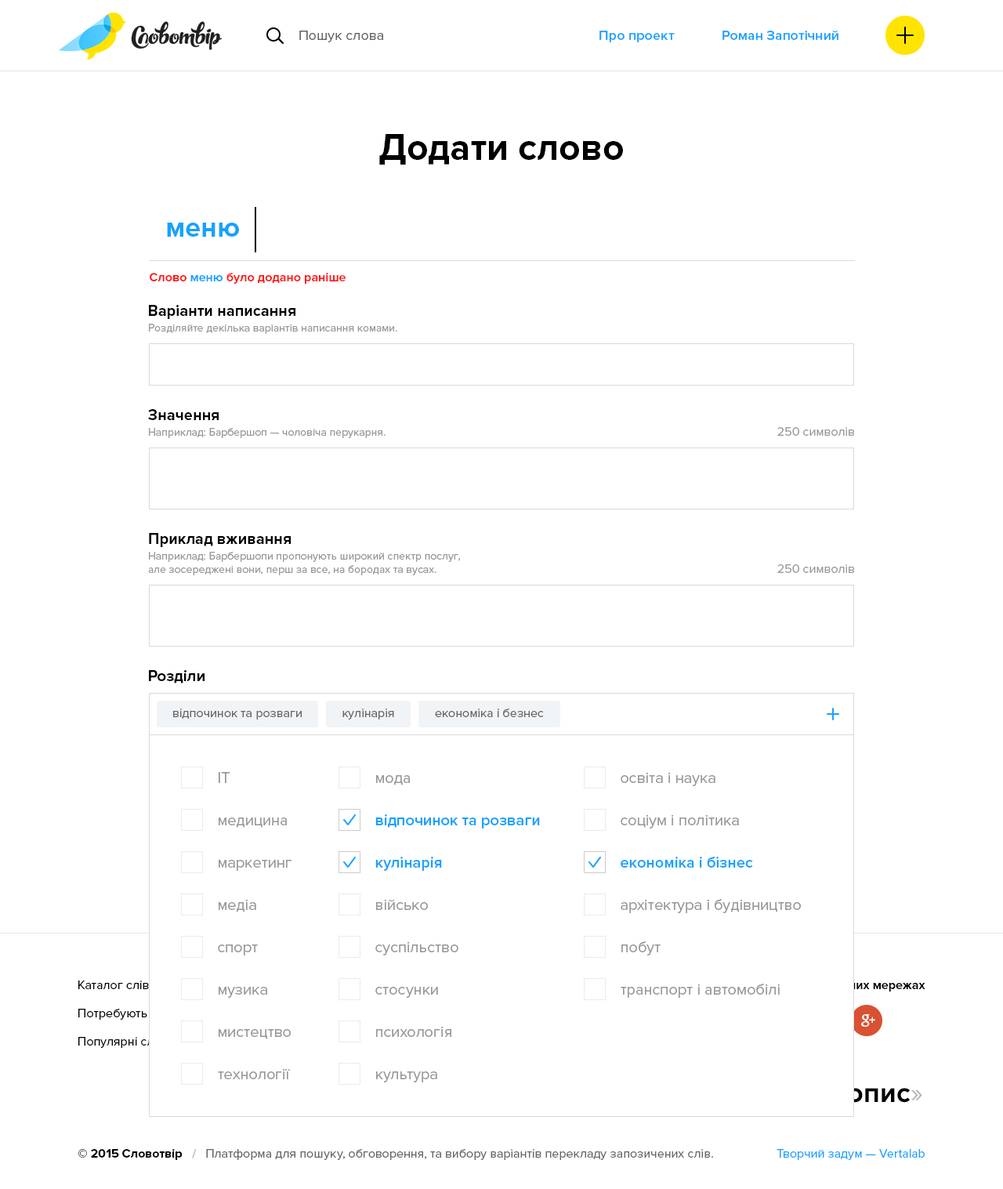
<style>
.page{position:relative;width:1003px;height:1189px;background:#ffffff}
.page>*{position:absolute;margin:0}
.t1{font:14.1px "ProximaNova-Regular";color:#666666}
.t2{font:14.1px "ProximaNova-Semibold";color:#17a2ff}
.t3{font:37.6px "ProximaNova-Bold";color:#000000}
.t4{font:28.2px "ProximaNova-Bold";color:#17a2ff}
.t5{font:12.5px "ProximaNova-Bold";color:#ff1717}
.t6{font:12.5px "ProximaNova-Bold";color:#17a2ff}
.t7{font:15.7px "ProximaNova-Bold";color:#000000}
.t8{font:11px "ProximaNova-Regular";color:#999999}
.t9{font:12.5px "ProximaNova-Regular";color:#999999}
.t10{font:12.5px "ProximaNova-Regular";color:#666666}
.t11{font:15.7px/42.3px "ProximaNova-Regular";color:#999999}
.t12{font:15.7px/42.3px "ProximaNova-Semibold";color:#17a2ff}
.t13{font:12.5px/28.2px "ProximaNova-Regular";color:#000000}
.t14{font:12.5px "ProximaNova-Bold"}
.t15{font:28.2px "ProximaNova-Bold"}
.t16{font:28.2px "ProximaNova-Regular"}
.t17{font:12.5px "ProximaNova-Bold";color:#000000}
.t18{font:12.5px "ProximaNova-Bold";color:#bfbfbf}
.t19{font:12.5px "ProximaNova-Regular";color:#17a2ff}
</style>
<div class="page">
<p class="t1" style="left:299px;top:31px;width:84px;height:11px">Пошук слова</p>
<p class="t2" style="left:599px;top:31px;width:76px;height:11px">Про проект</p>
<p class="t2" style="left:723px;top:31px;width:115px;height:9px">Роман Запотічний</p>
<p class="t3" style="left:379px;top:134px;width:244px;height:31px">Додати слово</p>
<p class="t4" style="left:167px;top:223px;width:72px;height:14px">меню</p>
<p class="t5" style="left:150px;top:273px;width:196px;height:11px">Слово <span class="t6">меню</span> було додано раніше</p>
<p class="t7" style="left:149px;top:305px;width:146px;height:14px">Варіанти написання</p>
<p class="t8" style="left:149px;top:324px;width:248px;height:10px">Розділяйте декілька варіантів написання комами.</p>
<p class="t7" style="left:148px;top:409px;width:71px;height:11px">Значення</p>
<p class="t8" style="left:149px;top:428px;width:237px;height:10px">Наприклад: Барбершоп — чоловіча перукарня.</p>
<p class="t9" style="left:777px;top:427px;width:77px;height:9px">250 символів</p>
<p class="t7" style="left:149px;top:533px;width:142px;height:14px">Приклад вживання</p>
<p class="t8" style="left:148px;top:552px;width:312px;height:23px">Наприклад: Барбершопи пропонують широкий спектр послуг,<br>але зосереджені вони, перш за все, на бородах та вусах.</p>
<p class="t9" style="left:777px;top:564px;width:77px;height:9px">250 символів</p>
<p class="t7" style="left:149px;top:670px;width:56px;height:13px">Розділи</p>
<p class="t10" style="left:173px;top:708px;width:129px;height:11px">відпочинок та розваги</p>
<p class="t10" style="left:342px;top:708px;width:52px;height:11px">кулінарія</p>
<p class="t10" style="left:435px;top:708px;width:109px;height:9px">економіка і безнес</p>
<p class="t11" style="left:218px;top:772px;width:74px;height:307px">IT<br>медицина<br>маркетинг<br>медіа<br>спорт<br>музика<br>мистецтво<br>технології</p>
<p class="t11" style="left:621px;top:772px;width:180px;height:226px">освіта і наука<br>соціум і політика<br><span class="t12">економіка і бізнес<br></span>архітектура і будівництво<br>побут<br>транспорт і автомобілі</p>
<p class="t11" style="left:375px;top:775px;width:165px;height:307px">мода<br><span class="t12">відпочинок та розваги<br>кулінарія<br></span>військо<br>суспільство<br>стосунки<br>психологія<br>культура</p>
<p class="t13" style="left:78px;top:980px;width:105px;height:68px">Каталог слів<br>Потребують уваги<br>Популярні слова</p>
<p class="t14" style="left:773px;top:980px;width:152px;height:11px">Ми в соціальних мережах</p>
<p class="t15" style="left:772px;top:1088px;width:150px;height:15px"><span class="t16">«</span>смакопис<span class="t16">»</span></p>
<p class="t10" style="left:78px;top:1149px;width:635px;height:11px"><span class="t17">© 2015 Словотвір   </span><span class="t18">/   </span>Платформа для пошуку, обговорення, та вибору варіантів перекладу запозичених слів.</p>
<p class="t19" style="left:777px;top:1149px;width:148px;height:11px">Творчий задум — Vertalab</p>
</div>
